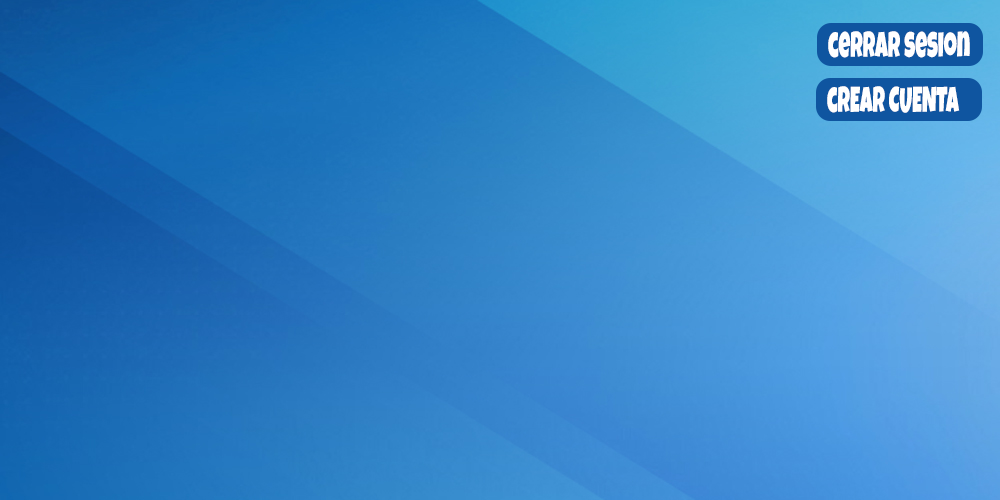
<style>
.page{position:relative;width:1000px;height:500px}
.page>*{position:absolute;margin:0}
.t1{font:35.9px "LuckiestGuy-Regular";color:#ffffff;scale:0.57 1}
</style>
<div class="page">
<p class="t1" style="left:828px;top:31px;width:142px;height:27px">cerrar sesion</p>
<p class="t1" style="left:827px;top:86px;width:133px;height:27px">cREAR CUENTA</p>
</div>
